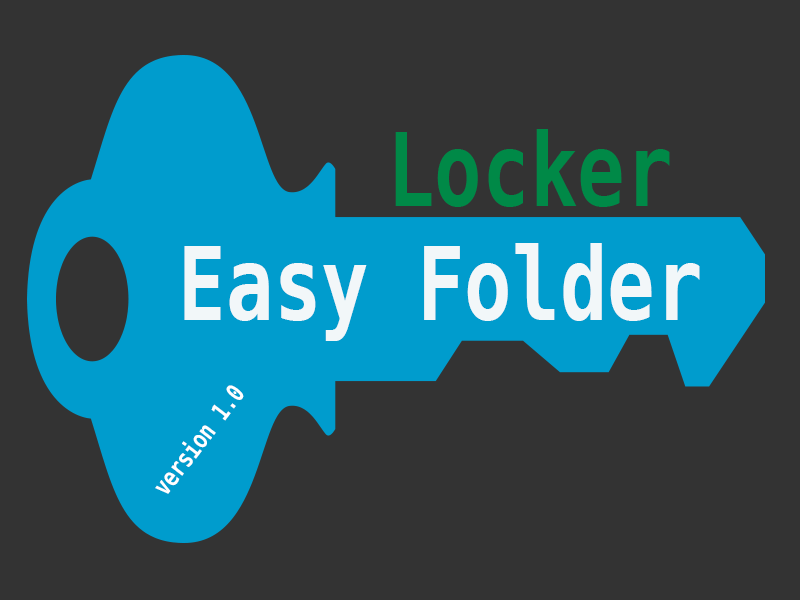
<style>
.page{position:relative;width:800px;height:600px;background:#333333}
.page>*{position:absolute;margin:0}
.t1{font:100.8px "BitstreamVeraSansMono-Bold";color:#008947;scale:0.79 1}
.t2{font:100.8px "BitstreamVeraSansMono-Bold";color:#f2f7f9;scale:0.79 1}
.t3{font:25.2px "BitstreamVeraSansMono-Bold";color:#ffffff;scale:0.79 1}
</style>
<div class="page">
<p class="t1" style="left:395px;top:129px;width:275px;height:78px">Locker</p>
<p class="t2" style="left:184px;top:243px;width:516px;height:98px">Easy Folder</p>
<p class="t3" style="left:155px;top:385px;width:89px;height:109px;rotate:-52deg">version 1.0</p>
</div>
